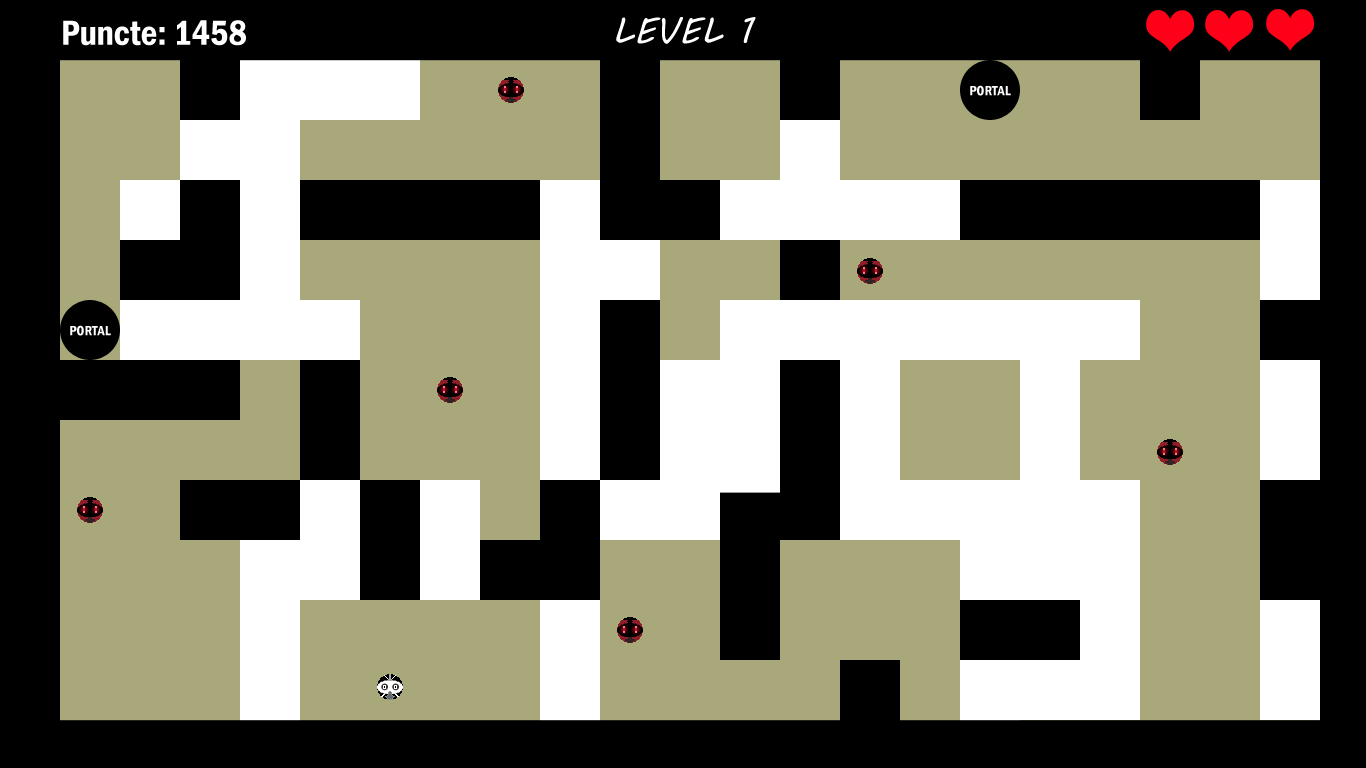
<style>
.page{position:relative;width:1366px;height:768px;background:#a8a87a}
.page>*{position:absolute;margin:0}
.t1{font:36px "MVBoli";color:#ffffff}
.t2{font:36px "FranklinGothic-DemiCond";color:#ffffff}
.t3{font:14px "FranklinGothic-DemiCond";color:#ffffff}
</style>
<div class="page">
<p class="t1" style="left:616px;top:17px;width:140px;height:27px">LEVEL 1</p>
<p class="t2" style="left:63px;top:20px;width:183px;height:26px">Puncte: 1458</p>
<p class="t3" style="left:970px;top:85px;width:41px;height:11px">PORTAL</p>
<p class="t3" style="left:70px;top:325px;width:41px;height:11px">PORTAL</p>
</div>
